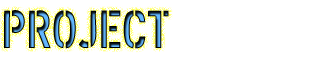
<style>
.page{position:relative;width:320px;height:60px;background:#ffffff}
.page>*{position:absolute;margin:0}
.t1{font:52.7px "XXIISTRAIGHT-ARMY"}
</style>
<div class="page">
<p class="t1" style="left:4px;top:10px;width:165px;height:39px">PROJECT</p>
</div>
